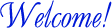
<style>
.page{position:relative;width:112px;height:28px;background:#ffffff}
.page>*{position:absolute;margin:0}
.t1{font:36px "UkrainianDecor";color:#0019d7}
</style>
<div class="page">
<p class="t1" style="left:0px;top:0px;width:112px;height:28px">Welcome!</p>
</div>
